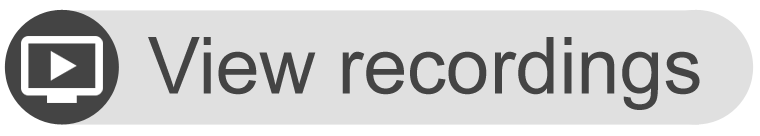
<style>
.page{position:relative;width:760px;height:136px;background:#e0e0e0}
.page>*{position:absolute;margin:0}
.t1{font:78.7px "ArialMT";color:#444444}
</style>
<div class="page">
<p class="t1" style="left:148px;top:37px;width:552px;height:73px">View recordings</p>
</div>
